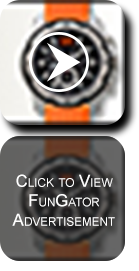
<style>
.page{position:relative;width:139px;height:271px}
.page>*{position:absolute;margin:0}
.t1{font:16.7px/19.4px "ArialMT";color:#ffffff;font-variant:small-caps}
</style>
<div class="page">
<p class="t1" style="left:12px;top:174px;width:103px;height:52px;text-align:center">Click to View FunGator Advertisement</p>
</div>
